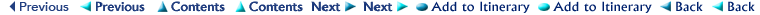
<style>
.page{position:relative;width:760px;height:15px;background:#ffffff}
.page>*{position:absolute;margin:0}
.t1{font:13px "Avenir-Medium";color:#223f80}
</style>
<div class="page">
<p class="t1" style="left:20px;top:2px;width:49px;height:9px">Previous</p>
<p class="t1" style="left:96px;top:2px;width:49px;height:9px">Previous</p>
<p class="t1" style="left:171px;top:2px;width:54px;height:9px">Contents</p>
<p class="t1" style="left:249px;top:2px;width:54px;height:9px">Contents</p>
<p class="t1" style="left:312px;top:2px;width:28px;height:9px">Next</p>
<p class="t1" style="left:364px;top:2px;width:28px;height:9px">Next</p>
</div>
